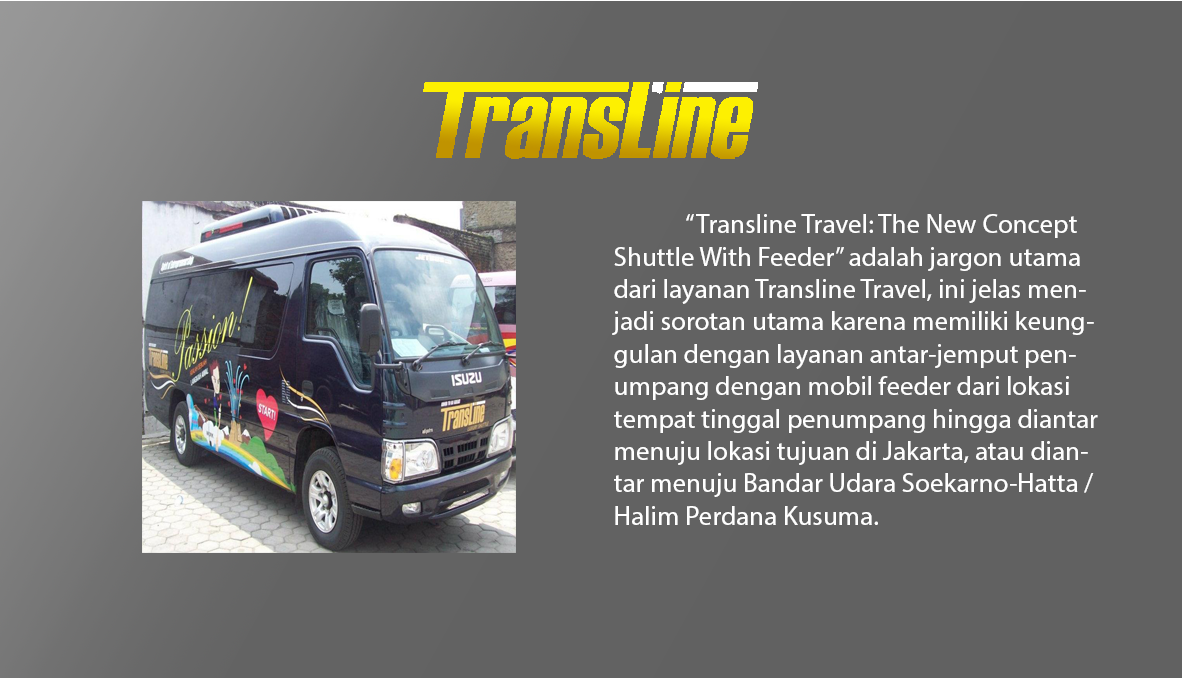
<style>
.page{position:relative;width:1182px;height:678px;background:#616161}
.page>*{position:absolute;margin:0}
.t1{font:27px "MyriadPro-Regular";color:#ffffff}
</style>
<div class="page">
<p class="t1" style="left:612px;top:214px;width:486px;height:311px">“Transline Travel: The New Concept Shuttle With Feeder” adalah jargon utama dari layanan Transline Travel, ini jelas menjadi sorotan utama karena memiliki keunggulan dengan layanan antar-jemput penumpang dengan mobil feeder dari lokasi tempat tinggal penumpang hingga diantar menuju lokasi tujuan di Jakarta, atau diantar menuju Bandar Udara Soekarno-Hatta / Halim Perdana Kusuma.</p>
</div>
